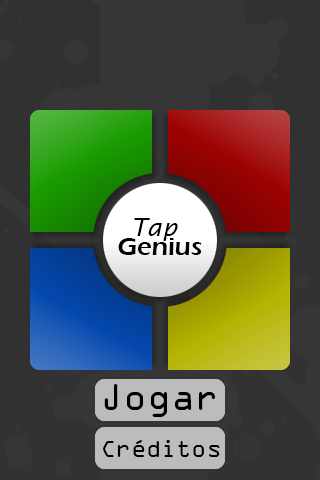
<style>
.page{position:relative;width:320px;height:480px}
.page>*{position:absolute;margin:0}
.t1{font:24.8px "LucidaSans-Italic";color:#000000}
.t2{font:25.7px "ErasITC-Demi";color:#000000}
.t3{font:33.3px "OCRAStd";color:#000000}
.t4{font:25px "OCRAExtended";color:#000000}
</style>
<div class="page">
<p class="t1" style="left:134px;top:218px;width:44px;height:23px">Tap</p>
<p class="t2" style="left:118px;top:238px;width:84px;height:17px">Genius</p>
<p class="t3" style="left:104px;top:384px;width:111px;height:33px">Jogar</p>
<p class="t4" style="left:103px;top:440px;width:117px;height:17px">Créditos</p>
</div>
